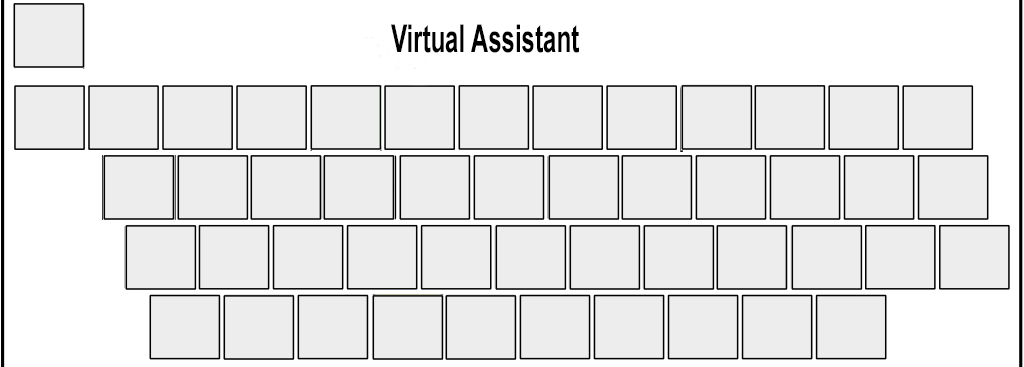
<style>
.page{position:relative;width:1024px;height:367px;background:#ededed}
.page>*{position:absolute;margin:0}
.t1{font:38.4px "Arial-BoldMT";color:#000000;scale:0.62 1}
</style>
<div class="page">
<p class="t1" style="left:391px;top:24px;width:188px;height:29px">Virtual Assistant</p>
</div>
